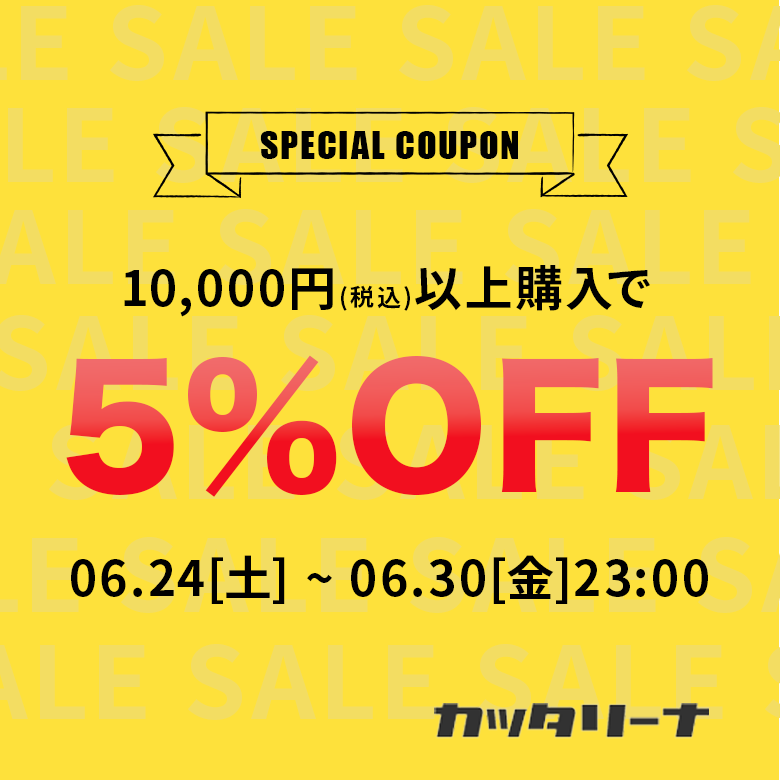
<style>
.page{position:relative;width:780px;height:780px;background:#fee13b}
.page>*{position:absolute;margin:0}
.t1{font:36px "Impact";letter-spacing:0.05em;color:#000000}
.t2{font:48px "SourceHanSansJP-Bold";letter-spacing:0.05em;color:#000000}
.t3{font:24px "SourceHanSansJP-Bold";letter-spacing:0.05em;color:#000000}
.t4{font:160px "HiraKakuStd-W8";letter-spacing:0.05em}
</style>
<div class="page">
<p class="t1" style="left:260px;top:131px;width:258px;height:28px">SPECIAL COUPON</p>
<p class="t2" style="left:124px;top:265px;width:526px;height:52px">10,000円<span class="t3">(税込)</span>以上購入で</p>
<p class="t4" style="left:66px;top:355px;width:647px;height:142px">5％OFF</p>
<p class="t2" style="left:71px;top:555px;width:637px;height:49px">06.24[土] ~ 06.30[金]23:00</p>
</div>
